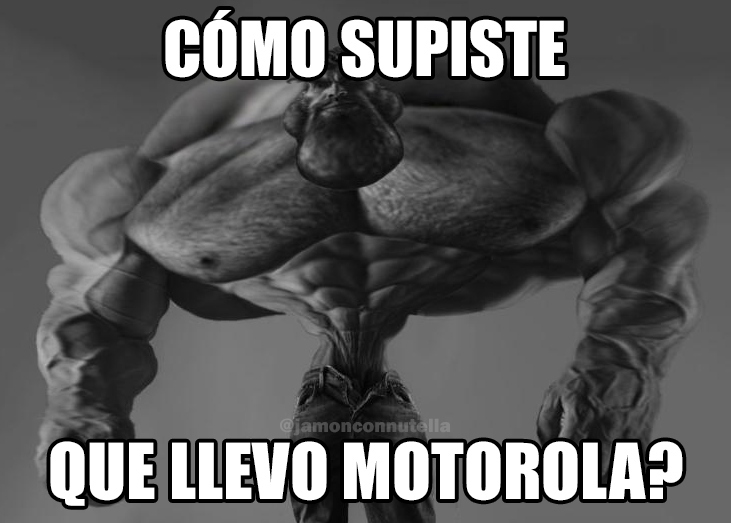
<style>
.page{position:relative;width:731px;height:523px}
.page>*{position:absolute;margin:0}
.t1{font:69.8px "Impact";color:#ffffff}
.t2{font:19.8px "FranklinGothic-Heavy"}
.t3{font:71.3px "Impact";color:#ffffff}
</style>
<div class="page">
<p class="t1" style="left:165px;top:10px;width:400px;height:68px">CÓMO SUPISTE</p>
<p class="t2" style="left:280px;top:418px;width:171px;height:18px">@jamonconnutella</p>
<p class="t3" style="left:50px;top:441px;width:633px;height:65px">QUE LLEVO MOTOROLA?</p>
</div>
